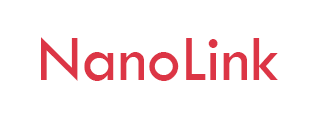
<style>
.page{position:relative;width:315px;height:126px;background:#ffffff}
.page>*{position:absolute;margin:0}
.t1{font:66.7px "TwCenMT-Regular";color:#dc3545}
</style>
<div class="page">
<p class="t1" style="left:41px;top:37px;width:237px;height:44px">NanoLink</p>
</div>
